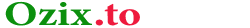
<style>
.page{position:relative;width:250px;height:28px;background:#ffffff}
.page>*{position:absolute;margin:0}
.t1{font:34.8px "MinionConceptRoman-Bold";color:#0c900e;scale:1.25 1}
.t2{font:34.8px "MinionConceptRoman-Bold";color:#ee1a3d;scale:1.25 1}
</style>
<div class="page">
<p class="t1" style="left:5px;top:1px;width:135px;height:25px">Ozix<span class="t2">.to</span></p>
</div>
